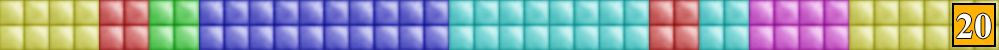
<style>
.page{position:relative;width:999px;height:50px}
.page>*{position:absolute;margin:0}
.t1{font:36px "TimesNewRomanPS-BoldMT";color:#ffffff}
</style>
<div class="page">
<p class="t1" style="left:956px;top:13px;width:35px;height:26px">20</p>
</div>
